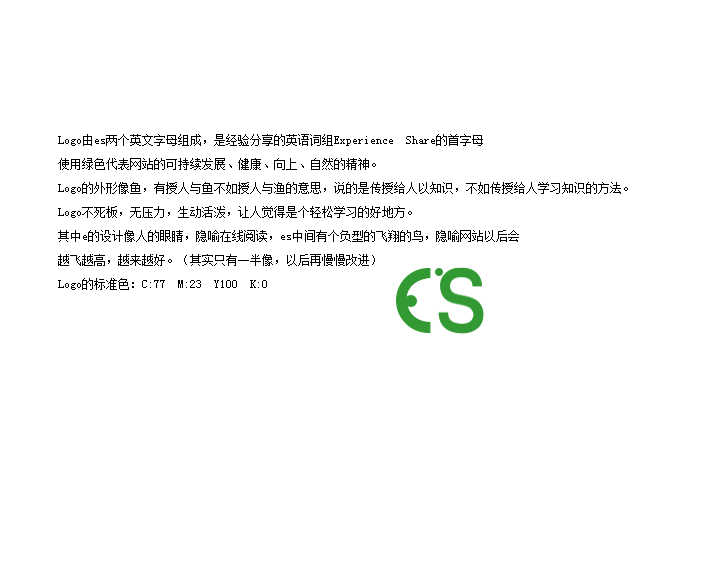
<style>
.page{position:relative;width:709px;height:567px;background:#ffffff}
.page>*{position:absolute;margin:0}
.t1{font:12px/24px "SimSun";color:#000000}
</style>
<div class="page">
<p class="t1" style="left:58px;top:134px;width:570px;height:156px">Logo由es两个英文字母组成，是经验分享的英语词组Experience  Share的首字母<br>使用绿色代表网站的可持续发展、健康、向上、自然的精神。<br>Logo的外形像鱼，有授人与鱼不如授人与渔的意思，说的是传授给人以知识，不如传授给人学习知识的方法。<br>Logo不死板，无压力，生动活泼，让人觉得是个轻松学习的好地方。<br>其中e的设计像人的眼睛，隐喻在线阅读，es中间有个负型的飞翔的鸟，隐喻网站以后会<br>越飞越高，越来越好。（其实只有一半像，以后再慢慢改进）<br>Logo的标准色：C:77  M:23  Y100  K:0</p>
</div>
